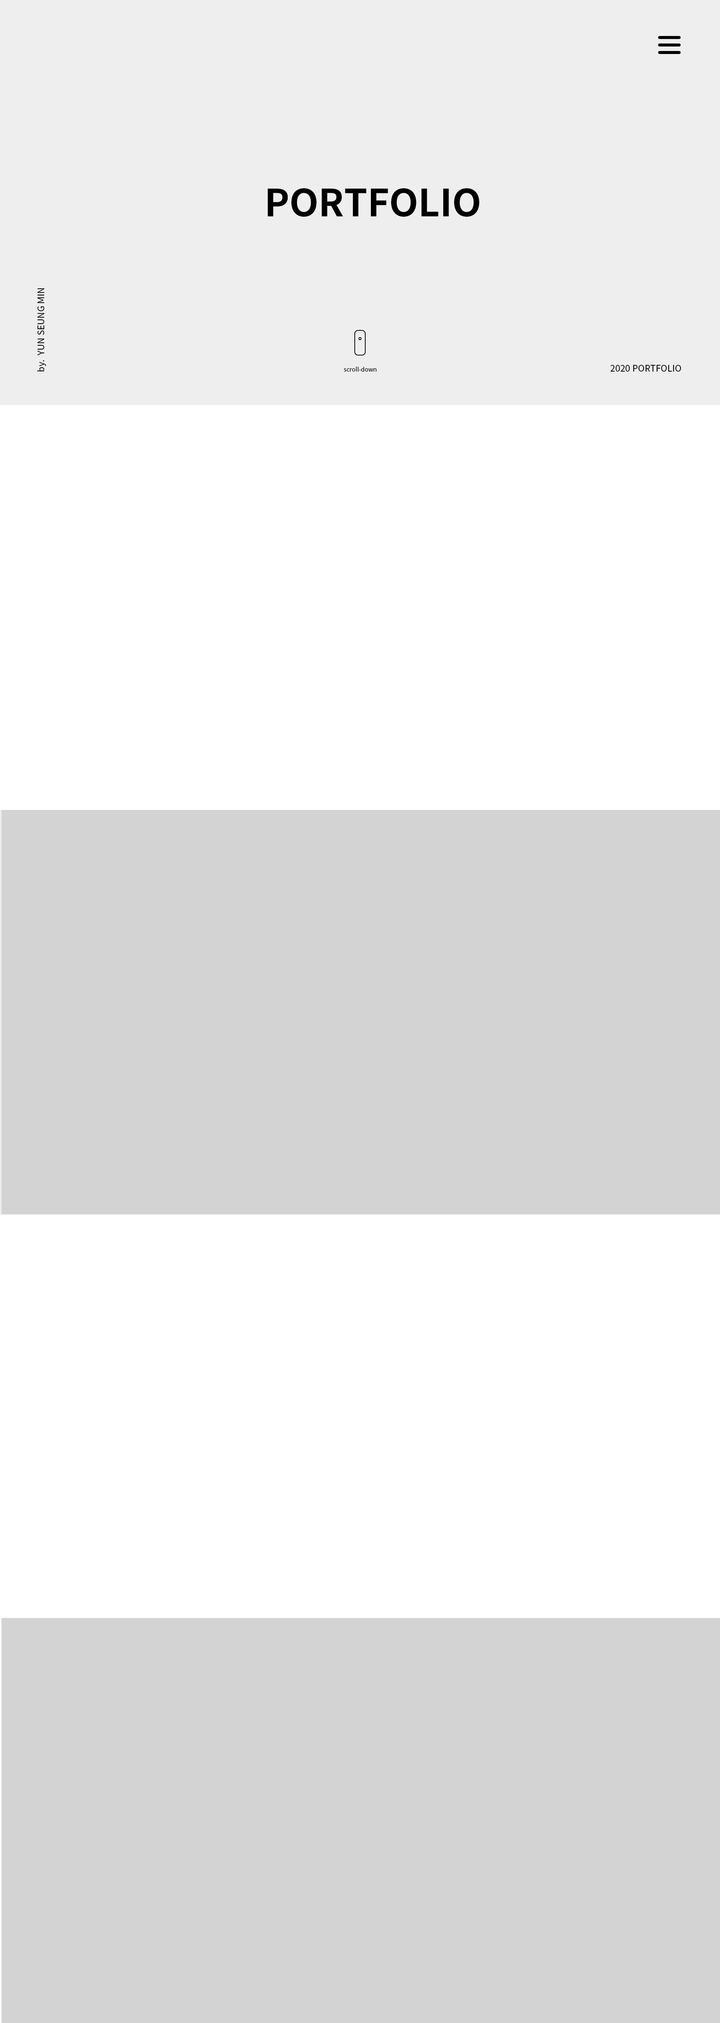
<style>
.page{position:relative;width:720px;height:2023px;background:#ffffff}
.page>*{position:absolute;margin:0}
.t1{font:37.5px "NotoSansKR-Bold";color:#000000}
.t2{font:9px "NotoSansKR-Regular";color:#000000}
.t3{font:6px "NotoSansKR-Regular";letter-spacing:-0.001em;color:#000000}
</style>
<div class="page">
<p class="t1" style="left:268px;top:188px;width:211px;height:29px">PORTFOLIO</p>
<p class="t2" style="left:37px;top:288px;width:9px;height:84px;rotate:-90deg">by.  YUN SEUNG MIN</p>
<p class="t2" style="left:610px;top:365px;width:71px;height:7px">2020 PORTFOLIO</p>
<p class="t3" style="left:344px;top:366px;width:32px;height:6px">scroll-down</p>
</div>
